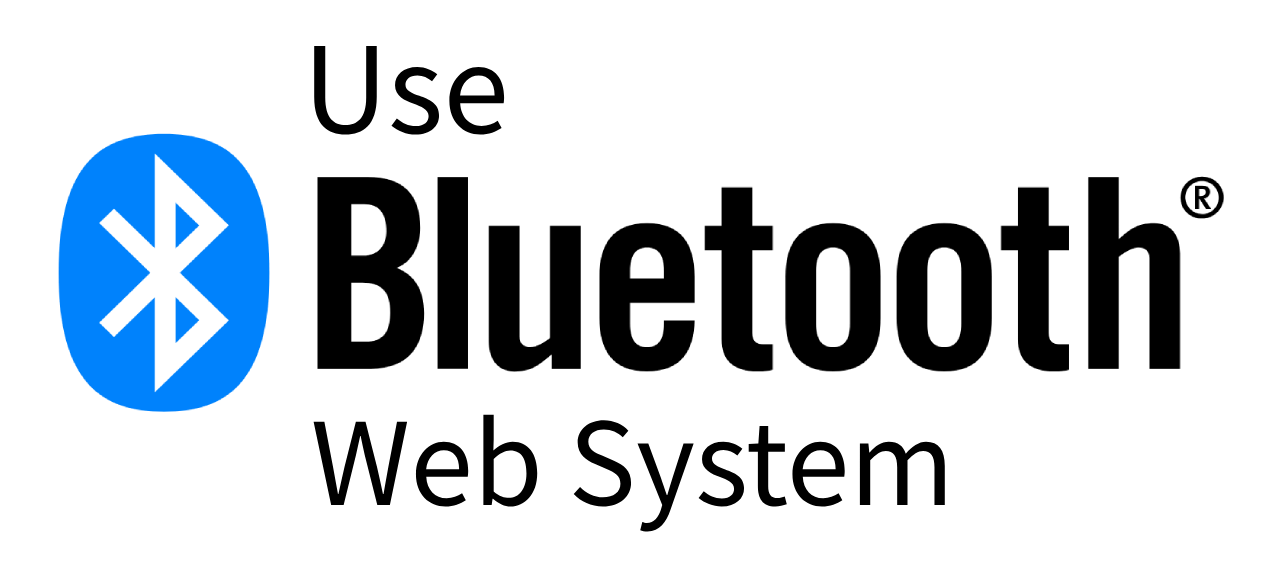
<style>
.page{position:relative;width:1280px;height:576px;background:#ffffff}
.page>*{position:absolute;margin:0}
.t1{font:118.7px "SourceHanSansTC-Regular";color:#000000}
.t2{font:113.3px "SourceHanSansTC-Regular";color:#000000}
</style>
<div class="page">
<p class="t1" style="left:314px;top:46px;width:191px;height:89px">Use</p>
<p class="t2" style="left:313px;top:414px;width:632px;height:118px">Web System</p>
</div>
